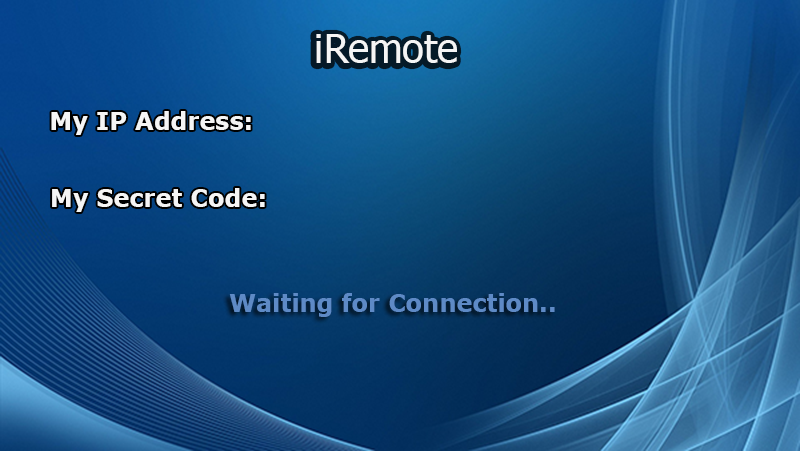
<style>
.page{position:relative;width:800px;height:451px}
.page>*{position:absolute;margin:0}
.t1{font:40px "Tahoma";color:#f5f5f5}
.t2{font:24px "Verdana-Bold";color:#f5f5f5}
.t3{font:24px "Verdana-Bold";color:#5e8ac6}
</style>
<div class="page">
<p class="t1" style="left:316px;top:34px;width:141px;height:29px">iRemote</p>
<p class="t2" style="left:51px;top:111px;width:200px;height:24px">My IP Address:</p>
<p class="t2" style="left:52px;top:188px;width:213px;height:24px">My Secret Code:</p>
<p class="t3" style="left:229px;top:293px;width:326px;height:24px">Waiting for Connection..</p>
</div>
